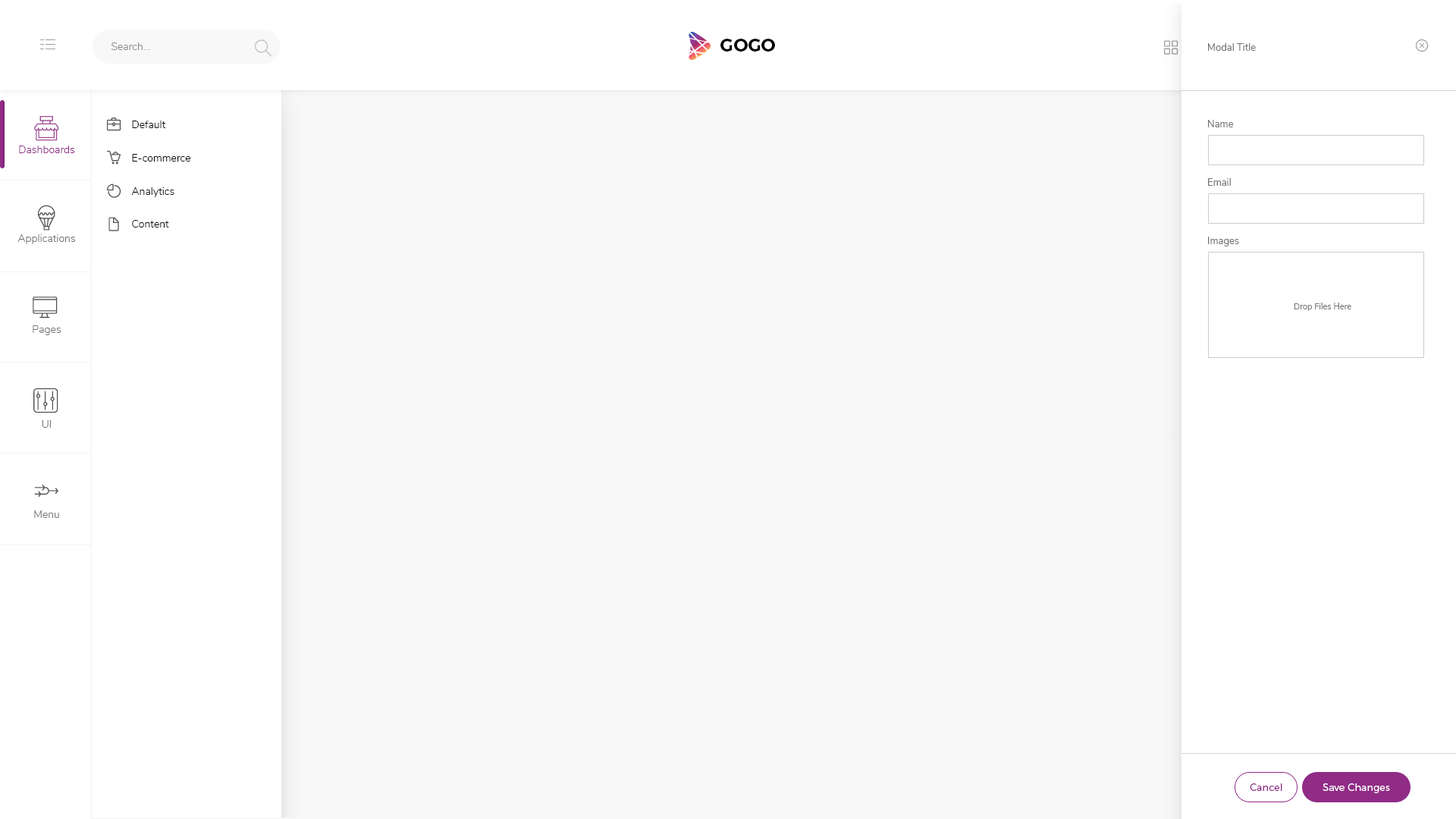
<style>
.page{position:relative;width:1456px;height:819px;background:#f8f8f8}
.page>*{position:absolute;margin:0}
.t1{font:18.2px "Montserrat-SemiBold";color:#000000}
.t2{font:10.6px "Nunito-Light";color:#898989}
.t3{font:9.9px "Nunito-Regular";color:#757575}
.t4{font:10.6px "Nunito-Light";color:#000000}
.t5{font:10.6px "Nunito-Light";color:#922c88}
.t6{font:10.6px "Nunito-Light";color:#737373}
.t7{font:8.3px "Nunito-Regular";color:#757575}
.t8{font:9.9px "Montserrat-Light";color:#902b86}
.t9{font:9.9px "Montserrat-Light";color:#ffffff}
</style>
<div class="page">
<p class="t1" style="left:720px;top:39px;width:55px;height:13px">GOGO</p>
<p class="t2" style="left:111px;top:42px;width:39px;height:8px">Search...</p>
<p class="t3" style="left:1208px;top:43px;width:48px;height:8px">Modal Title</p>
<p class="t4" style="left:132px;top:121px;width:34px;height:7px">Default</p>
<p class="t3" style="left:1208px;top:120px;width:26px;height:7px">Name</p>
<p class="t5" style="left:19px;top:146px;width:56px;height:7px">Dashboards</p>
<p class="t4" style="left:132px;top:154px;width:59px;height:8px">E-commerce</p>
<p class="t3" style="left:1208px;top:178px;width:23px;height:8px">Email</p>
<p class="t4" style="left:131px;top:187px;width:43px;height:10px">Analytics</p>
<p class="t4" style="left:132px;top:220px;width:37px;height:7px">Content</p>
<p class="t6" style="left:17px;top:234px;width:59px;height:10px">Applications</p>
<p class="t3" style="left:1208px;top:237px;width:31px;height:9px">Images</p>
<p class="t7" style="left:1294px;top:303px;width:57px;height:8px">Drop Files Here</p>
<p class="t6" style="left:33px;top:325px;width:28px;height:10px">Pages</p>
<p class="t6" style="left:42px;top:420px;width:9px;height:8px">UI</p>
<p class="t6" style="left:34px;top:510px;width:25px;height:8px">Menu</p>
<p class="t8" style="left:1250px;top:783px;width:32px;height:8px">Cancel</p>
<p class="t9" style="left:1323px;top:783px;width:67px;height:10px">Save Changes</p>
</div>
